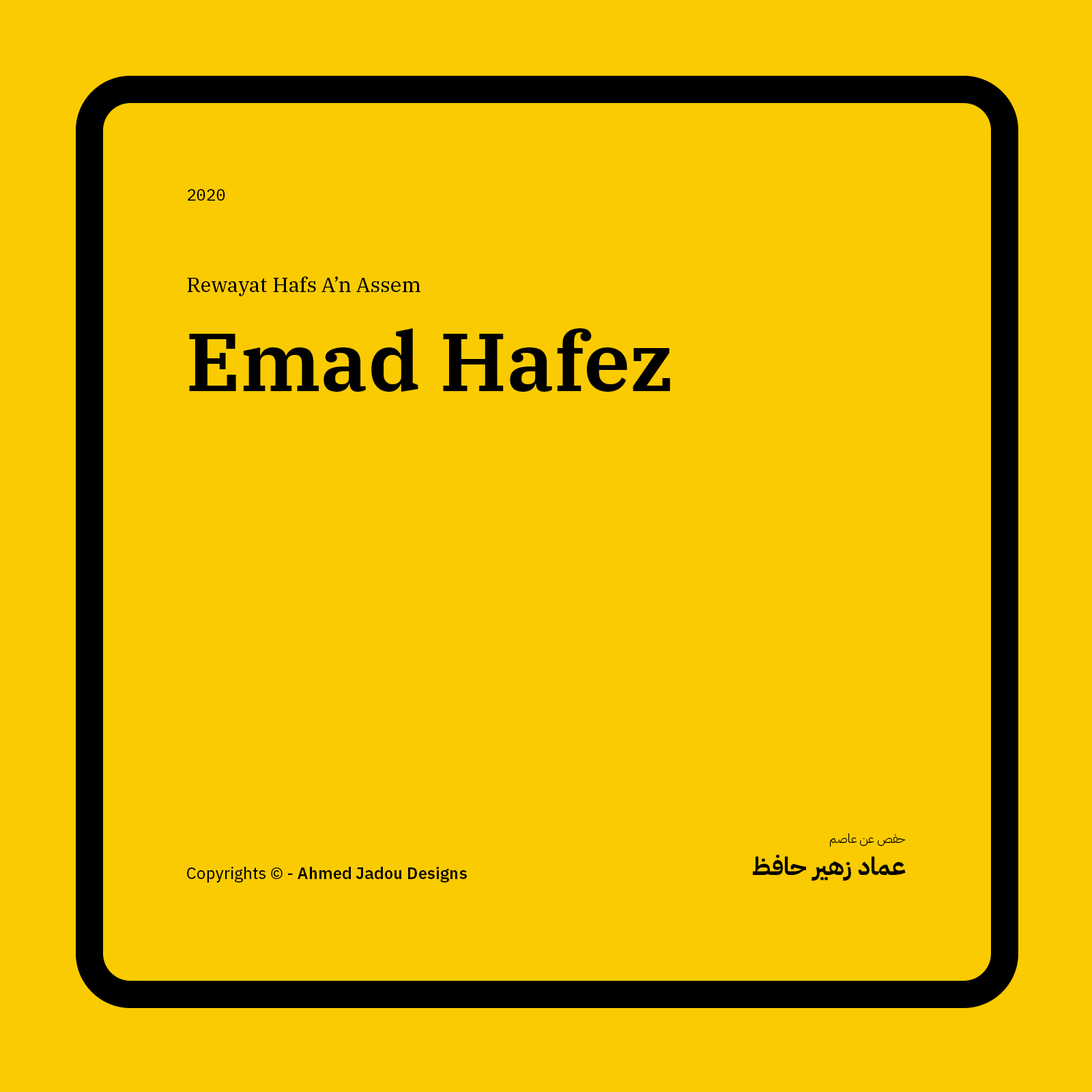
<style>
.page{position:relative;width:1092px;height:1092px;background:#facb00}
.page>*{position:absolute;margin:0}
.t1{font:16.4px "IBMPlexMono-Text";color:#000000}
.t2{font:20.5px "IBMPlexSerif-Text";color:#000000}
.t3{font:81.9px "IBMPlexSerif-SemiBold";color:#000000}
.t4{font:12.3px "IBMPlexArabic-Light";color:#000000}
.t5{font:24.6px "IBMPlexArabic-Bold";color:#000000}
.t6{font:16.4px "IBMPlexSans-SemiBold";color:#000000}
.t7{font:16.4px "IBMPlexSans-Text";color:#000000}
</style>
<div class="page">
<p class="t1" style="left:188px;top:189px;width:37px;height:12px">2020</p>
<p class="t2" style="left:187px;top:276px;width:233px;height:20px">Rewayat Hafs A’n Assem</p>
<p class="t3" style="left:189px;top:328px;width:481px;height:64px">Emad Hafez</p>
<p class="t4" style="left:830px;top:833px;width:76px;height:14px">حفص عن عاصم</p>
<p class="t5" style="left:753px;top:854px;width:153px;height:27px">عماد زهير حافظ</p>
<p class="t6" style="left:187px;top:867px;width:280px;height:15px"><span class="t7">Copyrights © - </span>Ahmed Jadou Designs</p>
</div>
